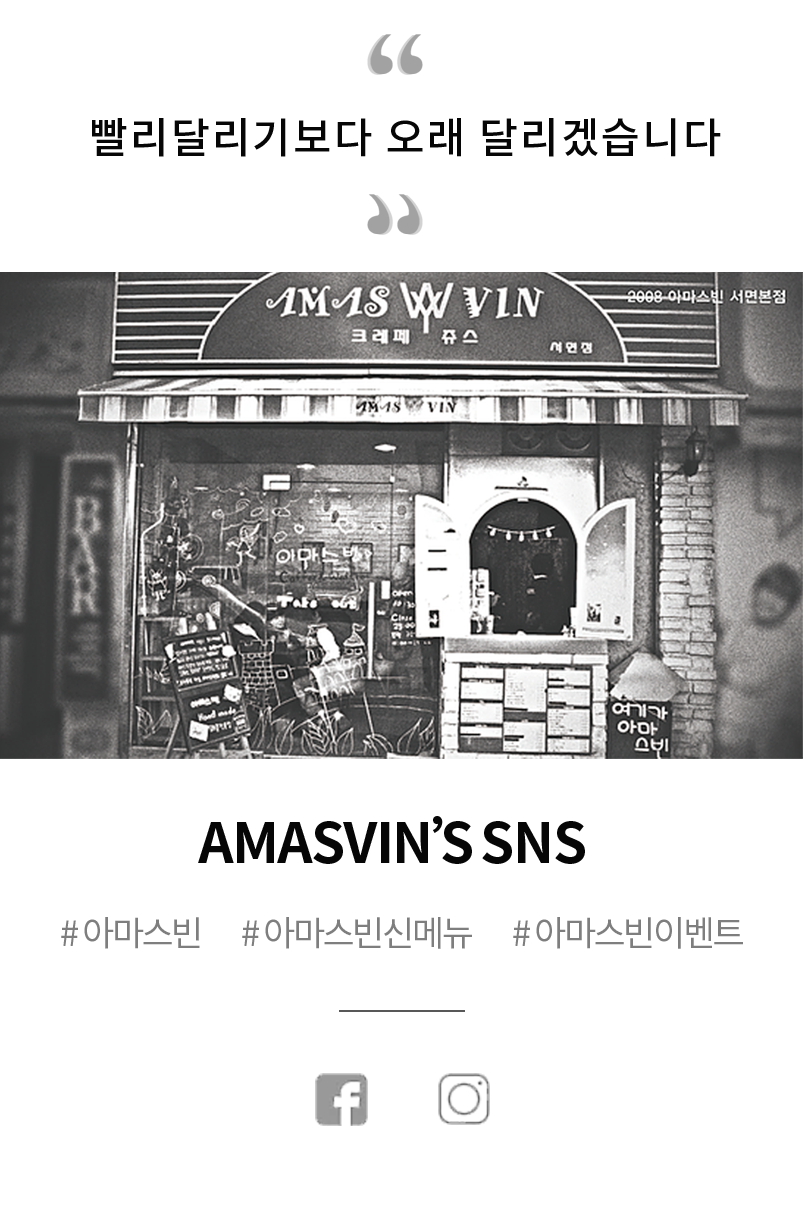
<style>
.page{position:relative;width:805px;height:1209px;background:#ffffff}
.page>*{position:absolute;margin:0}
.t1{font:42px "NotoSansCJKtc-Medium";letter-spacing:0.05em;color:#060606}
.t2{font:55px "NotoSansCJKtc-Bold";letter-spacing:-0.03em;color:#060606}
.t3{font:55px "NotoSansCJKtc-Bold";letter-spacing:-0.35em;color:#060606}
.t4{font:55px "NotoSansCJKtc-Bold";letter-spacing:-0.09em;color:#060606}
.t5{font:35px "NotoSansCJKtc-Regular";letter-spacing:-0.07em;color:#7e7e7e}
</style>
<div class="page">
<p class="t1" style="left:92px;top:118px;width:629px;height:39px">빨리달리기보다 오래 달리겠습니다</p>
<p class="t2" style="left:198px;top:816px;width:387px;height:48px">AMASVIN<span class="t3">’</span><span class="t4">S</span> SNS</p>
<p class="t5" style="left:61px;top:917px;width:139px;height:32px"># 아마스빈</p>
<p class="t5" style="left:242px;top:917px;width:230px;height:32px"># 아마스빈신메뉴</p>
<p class="t5" style="left:513px;top:917px;width:230px;height:32px"># 아마스빈이벤트</p>
</div>
